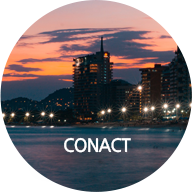
<style>
.page{position:relative;width:192px;height:192px;background:#ffffff}
.page>*{position:absolute;margin:0}
.t1{font:18px "NanumGothicBold";letter-spacing:-0.05em;color:#ffffff;scale:0.97 1}
</style>
<div class="page">
<p class="t1" style="left:64px;top:137px;width:67px;height:16px">CONACT</p>
</div>
